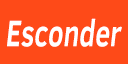
<style>
.page{position:relative;width:128px;height:64px;background:#fe4a18}
.page>*{position:absolute;margin:0}
.t1{font:37.8px "FogSansIt";color:#ffffff;scale:0.7 1}
</style>
<div class="page">
<p class="t1" style="left:7px;top:18px;width:115px;height:29px">Esconder</p>
</div>
